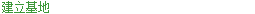
<style>
.page{position:relative;width:255px;height:14px;background:#ffffff}
.page>*{position:absolute;margin:0}
.t1{font:12px "SimSun";color:#3c9838}
</style>
<div class="page">
<p class="t1" style="left:2px;top:1px;width:47px;height:12px">建立基地</p>
</div>
